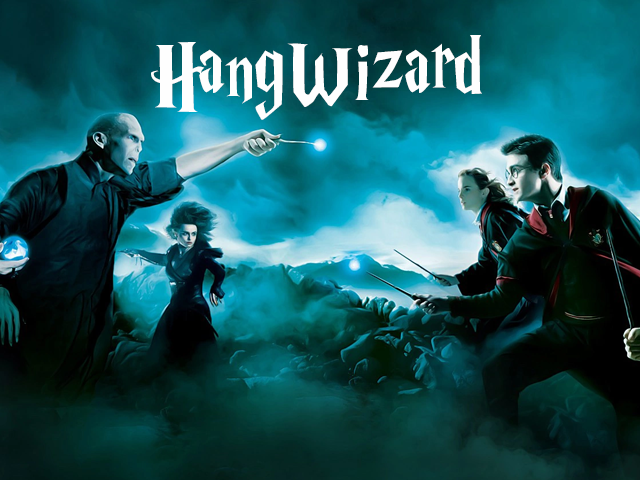
<style>
.page{position:relative;width:640px;height:480px}
.page>*{position:absolute;margin:0}
.t1{font:96px "HarryP";color:#fefefe}
</style>
<div class="page">
<p class="t1" style="left:151px;top:35px;width:331px;height:85px">HangWizard</p>
</div>
